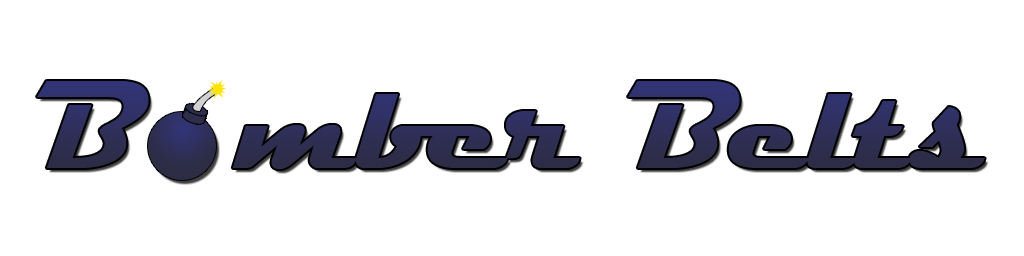
<style>
.page{position:relative;width:1024px;height:256px;background:#ffffff}
.page>*{position:absolute;margin:0}
.t1{font:126px "Magneto-Bold";color:#2e2f55}
</style>
<div class="page">
<p class="t1" style="left:37px;top:81px;width:948px;height:88px">B  mber Belts</p>
</div>
